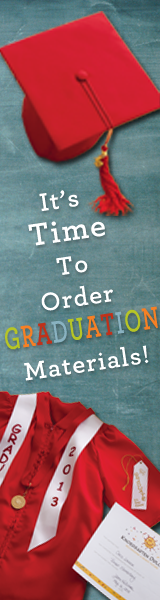
<style>
.page{position:relative;width:160px;height:600px}
.page>*{position:absolute;margin:0}
.t1{font:26px/33.1px "Archer-Semibold";letter-spacing:0.05em;color:#ffffff}
.t2{font:32.3px/33.1px "Archer-Semibold";letter-spacing:0.05em;color:#ffffff}
.t3{font:32.2px/33.1px "Archer-Semibold";letter-spacing:0.05em;color:#b6c526;text-transform:uppercase;scale:0.68 1}
.t4{font:32.2px/33.1px "Archer-Semibold";letter-spacing:0.05em;color:#f58025;text-transform:uppercase;scale:0.68 1}
.t5{font:32.2px/33.1px "Archer-Semibold";letter-spacing:0.05em;color:#bf311a;text-transform:uppercase;scale:0.68 1}
.t6{font:32.2px/33.1px "Archer-Semibold";letter-spacing:0.05em;color:#89b2c1;text-transform:uppercase;scale:0.68 1}
</style>
<div class="page">
<p class="t1" style="left:5px;top:190px;width:153px;height:191px;text-align:center;rotate:-8deg">It’s <br><span class="t2">Time<br></span>To<br>Order<br><span class="t3">G</span><span class="t4">r</span><span class="t5">a</span><span class="t6">d</span><span class="t3">u</span><span class="t4">a</span><span class="t5">t</span><span class="t6">i</span><span class="t3">o</span><span class="t4">n<br></span>Materials!</p>
</div>
